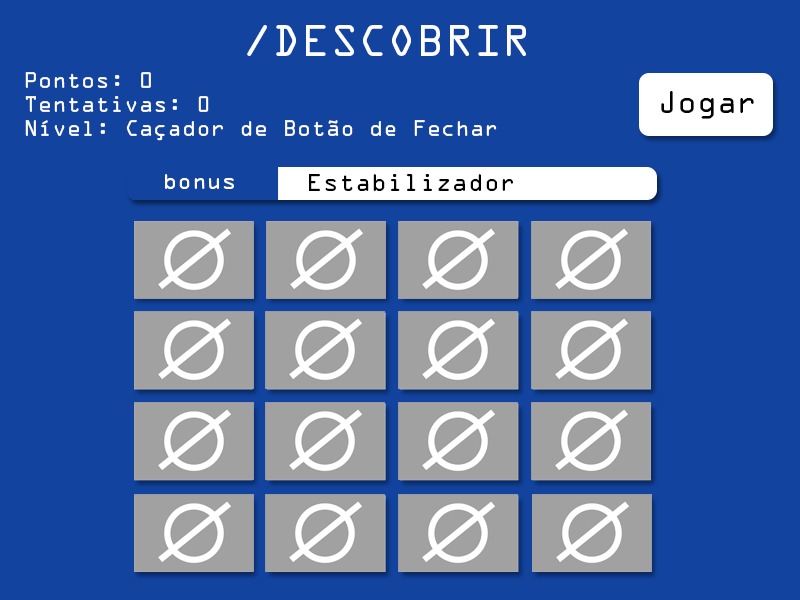
<style>
.page{position:relative;width:800px;height:600px;background:#11439f}
.page>*{position:absolute;margin:0}
.t1{font:40px "OCRAStd";color:#ffffff}
.t2{font:20px "OCRAStd";color:#ffffff}
.t3{font:27.8px "OCRAStd";color:#000000}
.t4{font:20.4px "OCRAStd";color:#ffffff}
.t5{font:22.3px "OCRAStd";color:#000000}
</style>
<div class="page">
<p class="t1" style="left:247px;top:25px;width:279px;height:31px">/DESCOBRIR</p>
<p class="t2" style="left:25px;top:72px;width:472px;height:69px">Pontos: 0<br>Tentativas: 0<br>Nível: Caçador de Botão de Fechar</p>
<p class="t3" style="left:661px;top:91px;width:93px;height:28px">Jogar</p>
<p class="t4" style="left:165px;top:174px;width:69px;height:15px">bonus</p>
<p class="t5" style="left:309px;top:174px;width:204px;height:17px">Estabilizador</p>
</div>
